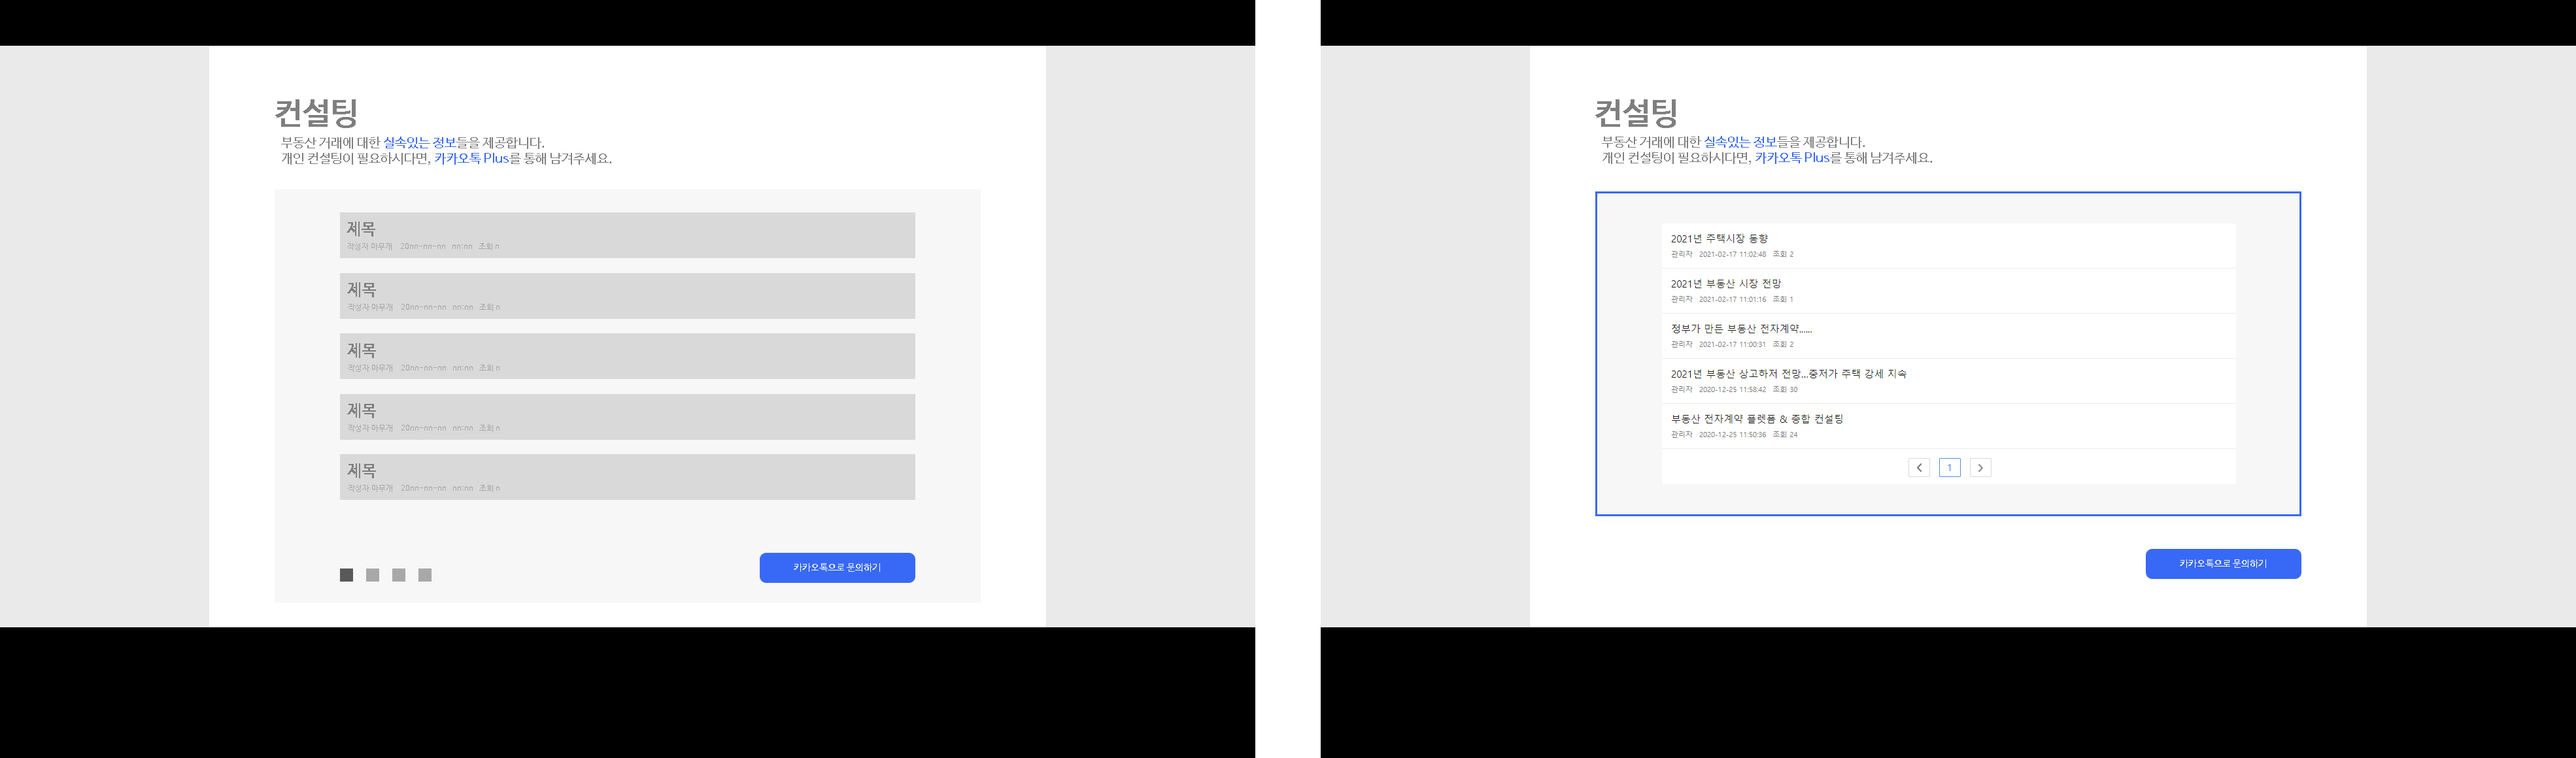
<style>
.page{position:relative;width:2576px;height:758px;background:#ffffff}
.page>*{position:absolute;margin:0}
.t1{font:31.4px "NanumBarunGothicBold";color:#7f7f7f}
.t2{font:13.1px "NanumBarunGothic";color:#7f7f7f}
.t3{font:13.1px "NanumBarunGothic";color:#3869f6}
.t4{font:16.3px "NanumBarunGothicBold";color:#7f7f7f}
.t5{font:7.8px "NanumBarunGothic";color:#a7a7a7}
.t6{font:9.8px "NanumBarunGothicBold";color:#ffffff}
</style>
<div class="page">
<p class="t1" style="left:275px;top:99px;width:81px;height:29px">컨설팅</p>
<p class="t1" style="left:1595px;top:99px;width:81px;height:29px">컨설팅</p>
<p class="t2" style="left:281px;top:137px;width:263px;height:12px">부동산 거래에 대한 <span class="t3">실속있는 정보</span>들을 제공합니다.</p>
<p class="t2" style="left:1602px;top:136px;width:263px;height:12px">부동산 거래에 대한 <span class="t3">실속있는 정보</span>들을 제공합니다.</p>
<p class="t2" style="left:282px;top:152px;width:329px;height:13px">개인 컨설팅이 필요하시다면, <span class="t3">카카오톡 Plus</span>를 통해 남겨주세요.</p>
<p class="t2" style="left:1602px;top:152px;width:330px;height:13px">개인 컨설팅이 필요하시다면, <span class="t3">카카오톡 Plus</span>를 통해 남겨주세요.</p>
<p class="t4" style="left:347px;top:222px;width:28px;height:15px">제목</p>
<p class="t5" style="left:347px;top:243px;width:45px;height:7px">작성자 아무개</p>
<p class="t5" style="left:401px;top:243px;width:44px;height:6px">20nn-nn-nn</p>
<p class="t5" style="left:452px;top:245px;width:20px;height:4px">nn:nn</p>
<p class="t5" style="left:479px;top:243px;width:20px;height:7px">조회 n</p>
<p class="t4" style="left:347px;top:282px;width:29px;height:15px">제목</p>
<p class="t5" style="left:348px;top:304px;width:44px;height:7px">작성자 아무개</p>
<p class="t5" style="left:401px;top:304px;width:45px;height:6px">20nn-nn-nn</p>
<p class="t5" style="left:453px;top:305px;width:20px;height:5px">nn:nn</p>
<p class="t5" style="left:479px;top:304px;width:21px;height:7px">조회 n</p>
<p class="t4" style="left:347px;top:343px;width:29px;height:15px">제목</p>
<p class="t5" style="left:348px;top:365px;width:44px;height:7px">작성자 아무개</p>
<p class="t5" style="left:401px;top:365px;width:45px;height:6px">20nn-nn-nn</p>
<p class="t5" style="left:479px;top:365px;width:21px;height:7px">조회 n</p>
<p class="t5" style="left:453px;top:366px;width:20px;height:5px">nn:nn</p>
<p class="t4" style="left:347px;top:403px;width:29px;height:15px">제목</p>
<p class="t5" style="left:348px;top:425px;width:44px;height:7px">작성자 아무개</p>
<p class="t5" style="left:401px;top:425px;width:45px;height:6px">20nn-nn-nn</p>
<p class="t5" style="left:479px;top:425px;width:21px;height:7px">조회 n</p>
<p class="t5" style="left:453px;top:426px;width:20px;height:5px">nn:nn</p>
<p class="t4" style="left:347px;top:464px;width:29px;height:15px">제목</p>
<p class="t5" style="left:348px;top:485px;width:44px;height:7px">작성자 아무개</p>
<p class="t5" style="left:401px;top:485px;width:45px;height:6px">20nn-nn-nn</p>
<p class="t5" style="left:479px;top:485px;width:21px;height:7px">조회 n</p>
<p class="t5" style="left:453px;top:486px;width:20px;height:5px">nn:nn</p>
<p class="t6" style="left:794px;top:564px;width:86px;height:8px">카카오톡으로 문의하기</p>
<p class="t6" style="left:2180px;top:560px;width:86px;height:8px">카카오톡으로 문의하기</p>
</div>
